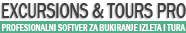
<style>
.page{position:relative;width:186px;height:33px;background:#ffffff}
.page>*{position:absolute;margin:0}
.t1{font:22px "FranklinGothic-Medium";color:#414141;scale:0.71 1}
.t2{font:10px "FranklinGothic-DemiCond";color:#ffffff;scale:0.88 1}
</style>
<div class="page">
<p class="t1" style="left:2px;top:3px;width:184px;height:15px">EXCURSIONS &amp; TOURS PRO</p>
<p class="t2" style="left:2px;top:24px;width:184px;height:7px">PROFESIONALNI SOFTVER ZA BUKIRANJE IZLETA I TURA</p>
</div>
